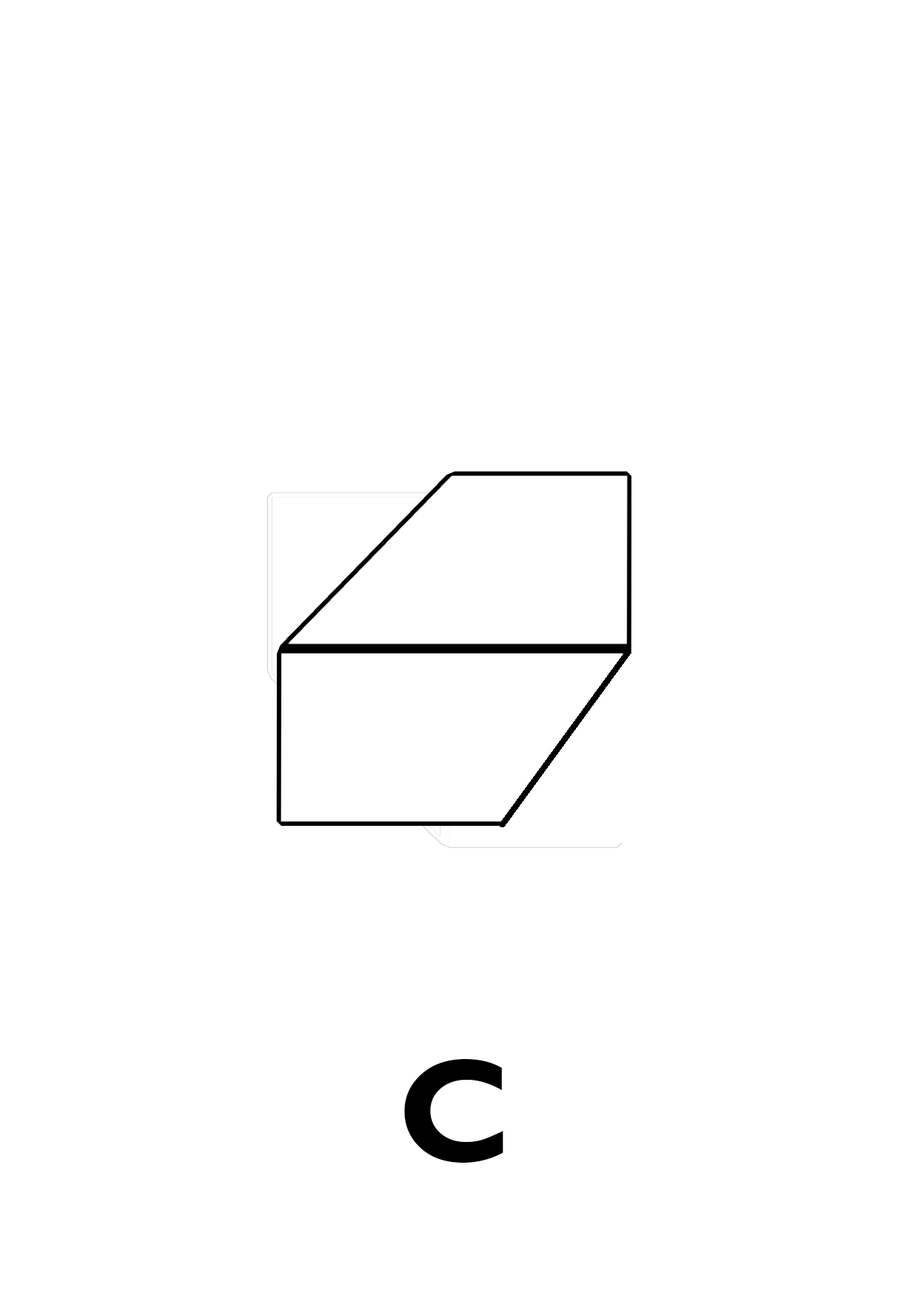
<style>
.page{position:relative;width:918px;height:1299px;background:#ffffff}
.page>*{position:absolute;margin:0}
.t1{font:148.1px "GillSansMT-Bold";color:#000000}
</style>
<div class="page">
<p class="t1" style="left:404px;top:1059px;width:100px;height:103px">C</p>
</div>
